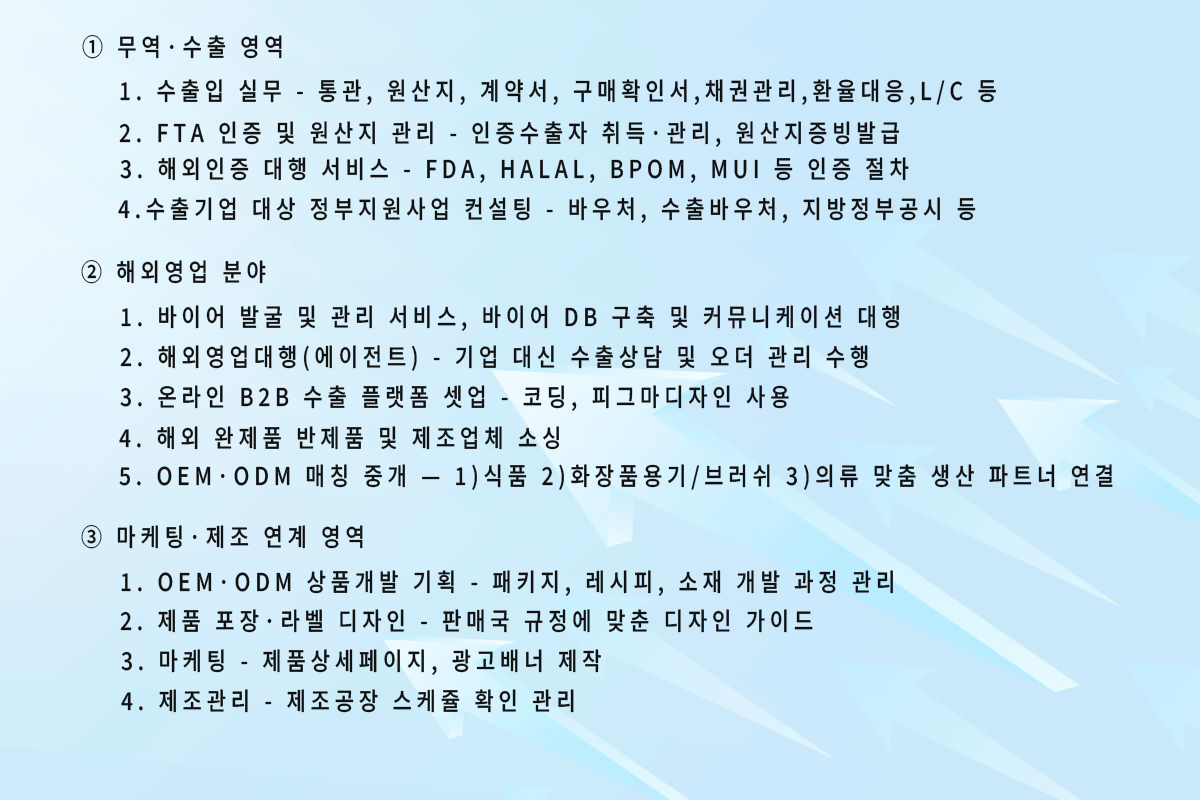
<style>
.page{position:relative;width:1200px;height:800px}
.page>*{position:absolute;margin:0}
.t1{font:42.1px "NotoSansKR-Medium";letter-spacing:0.23em;color:#111111;scale:0.85 1}
</style>
<div class="page">
<p class="t1" style="left:82px;top:35px;width:200px;height:24px">① 무역·수출 영역</p>
<p class="t1" style="left:120px;top:79px;width:876px;height:26px">1. 수출입 실무 - 통관, 원산지, 계약서, 구매확인서,채권관리,환율대응,L/C 등</p>
<p class="t1" style="left:119px;top:121px;width:780px;height:26px">2. FTA 인증 및 원산지 관리 - 인증수출자 취득·관리, 원산지증빙발급</p>
<p class="t1" style="left:120px;top:157px;width:789px;height:26px">3. 해외인증 대행 서비스 - FDA, HALAL, BPOM, MUI 등 인증 절차</p>
<p class="t1" style="left:118px;top:197px;width:858px;height:26px">4.수출기업 대상 정부지원사업 컨설팅 - 바우처, 수출바우처, 지방정부공시 등</p>
<p class="t1" style="left:81px;top:260px;width:185px;height:24px">② 해외영업 분야</p>
<p class="t1" style="left:121px;top:305px;width:778px;height:26px">1. 바이어 발굴 및 관리 서비스, 바이어 DB 구축 및 커뮤니케이션 대행</p>
<p class="t1" style="left:120px;top:345px;width:748px;height:26px">2. 해외영업대행(에이전트) - 기업 대신 수출상담 및 오더 관리 수행</p>
<p class="t1" style="left:120px;top:385px;width:669px;height:26px">3. 온라인 B2B 수출 플랫폼 셋업 - 코딩, 피그마디자인 사용</p>
<p class="t1" style="left:119px;top:426px;width:441px;height:24px">4. 해외 완제품 반제품 및 제조업체 소싱</p>
<p class="t1" style="left:119px;top:464px;width:994px;height:26px">5. OEM·ODM 매칭 중개 — 1)식품 2)화장품용기/브러쉬 3)의류 맞춤 생산 파트너 연결</p>
<p class="t1" style="left:81px;top:525px;width:282px;height:24px">③ 마케팅·제조 연계 영역</p>
<p class="t1" style="left:121px;top:570px;width:772px;height:26px">1. OEM·ODM 상품개발 기획 - 패키지, 레시피, 소재 개발 과정 관리</p>
<p class="t1" style="left:120px;top:609px;width:693px;height:24px">2. 제품 포장·라벨 디자인 - 판매국 규정에 맞춘 디자인 가이드</p>
<p class="t1" style="left:121px;top:649px;width:480px;height:26px">3. 마케팅 - 제품상세페이지, 광고배너 제작</p>
<p class="t1" style="left:121px;top:689px;width:453px;height:24px">4. 제조관리 - 제조공장 스케쥴 확인 관리</p>
</div>
